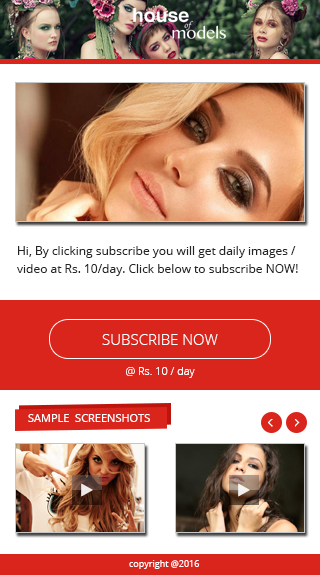
<style>
.page{position:relative;width:320px;height:575px;background:#ffffff}
.page>*{position:absolute;margin:0}
.t1{font:12px/18px "OpenSans";color:#252525}
.t2{font:15px "OpenSans-Light";color:#fffefe}
.t3{font:11px "OpenSans-Light";color:#fffefe}
.t4{font:11px "OpenSans";color:#ffffff}
.t5{font:9px "OpenSans";color:#fefefe}
</style>
<div class="page">
<p class="t1" style="left:17px;top:246px;width:281px;height:30px">Hi, By clicking subscribe you will get daily images / video at Rs. 10/day. Click below to subscribe NOW!</p>
<p class="t2" style="left:102px;top:334px;width:116px;height:11px">SUBSCRIBE NOW</p>
<p class="t3" style="left:126px;top:367px;width:69px;height:11px">@ Rs. 10 / day</p>
<p class="t4" style="left:28px;top:414px;width:122px;height:8px">SAMPLE  SCREENSHOTS</p>
<p class="t5" style="left:129px;top:560px;width:71px;height:9px">copyright @2016</p>
</div>
